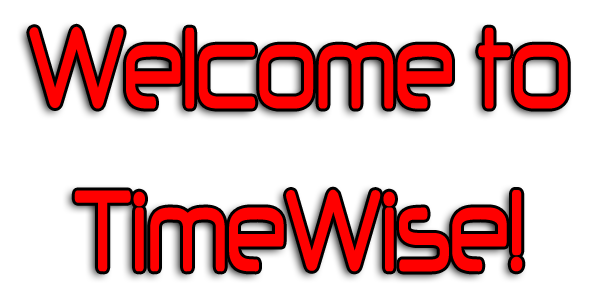
<style>
.page{position:relative;width:600px;height:300px;background:#ffffff}
.page>*{position:absolute;margin:0}
.t1{font:135.7px "Neuropol";color:#ff0000;scale:0.62 1}
</style>
<div class="page">
<p class="t1" style="left:29px;top:26px;width:539px;height:246px;text-align:center">Welcome to TimeWise!</p>
</div>
